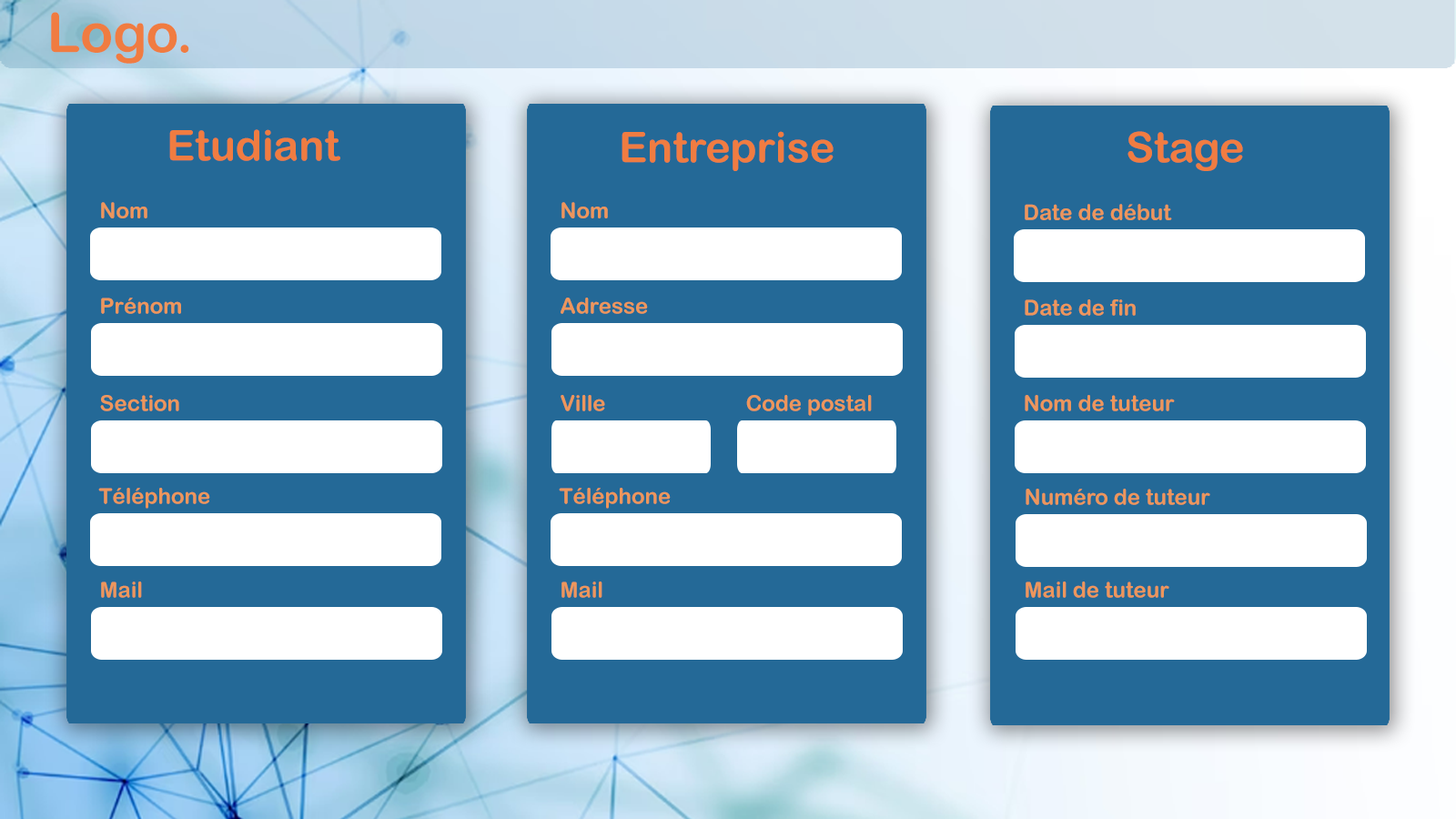
<style>
.page{position:relative;width:1456px;height:819px;background:#246997}
.page>*{position:absolute;margin:0}
.t1{font:54.6px "ArialRoundedMTBold";color:#f07c41}
.t2{font:42.3px "ArialRoundedMTBold";color:#f07c41}
.t3{font:21.8px "ArialRoundedMTBold";color:#ed965c}
</style>
<div class="page">
<p class="t1" style="left:51px;top:12px;width:138px;height:52px">Logo.</p>
<p class="t2" style="left:169px;top:129px;width:171px;height:32px">Etudiant</p>
<p class="t2" style="left:622px;top:131px;width:212px;height:40px">Entreprise</p>
<p class="t2" style="left:1127px;top:131px;width:116px;height:40px">Stage</p>
<p class="t3" style="left:101px;top:202px;width:46px;height:16px">Nom</p>
<p class="t3" style="left:561px;top:202px;width:47px;height:16px">Nom</p>
<p class="t3" style="left:1025px;top:204px;width:147px;height:16px">Date de début</p>
<p class="t3" style="left:101px;top:298px;width:80px;height:16px">Prénom</p>
<p class="t3" style="left:561px;top:298px;width:87px;height:16px">Adresse</p>
<p class="t3" style="left:1025px;top:299px;width:111px;height:17px">Date de fin</p>
<p class="t3" style="left:100px;top:395px;width:79px;height:16px">Section</p>
<p class="t3" style="left:561px;top:395px;width:44px;height:16px">Ville</p>
<p class="t3" style="left:746px;top:395px;width:126px;height:21px">Code postal</p>
<p class="t3" style="left:1025px;top:395px;width:150px;height:16px">Nom de tuteur</p>
<p class="t3" style="left:98px;top:488px;width:112px;height:21px">Téléphone</p>
<p class="t3" style="left:559px;top:488px;width:112px;height:21px">Téléphone</p>
<p class="t3" style="left:1026px;top:489px;width:184px;height:16px">Numéro de tuteur</p>
<p class="t3" style="left:101px;top:581px;width:41px;height:17px">Mail</p>
<p class="t3" style="left:561px;top:581px;width:41px;height:17px">Mail</p>
<p class="t3" style="left:1026px;top:581px;width:143px;height:17px">Mail de tuteur</p>
</div>
